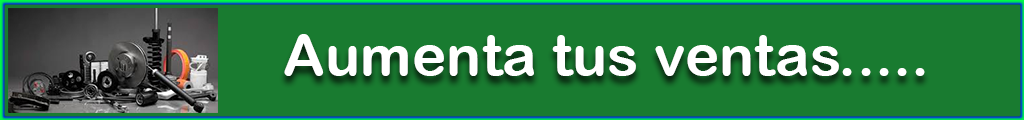
<style>
.page{position:relative;width:1024px;height:120px;background:#197b30}
.page>*{position:absolute;margin:0}
.t1{font:58.3px "ArialRoundedMTBold";color:#ffffff}
</style>
<div class="page">
<p class="t1" style="left:284px;top:34px;width:641px;height:42px">Aumenta tus ventas.....</p>
</div>
